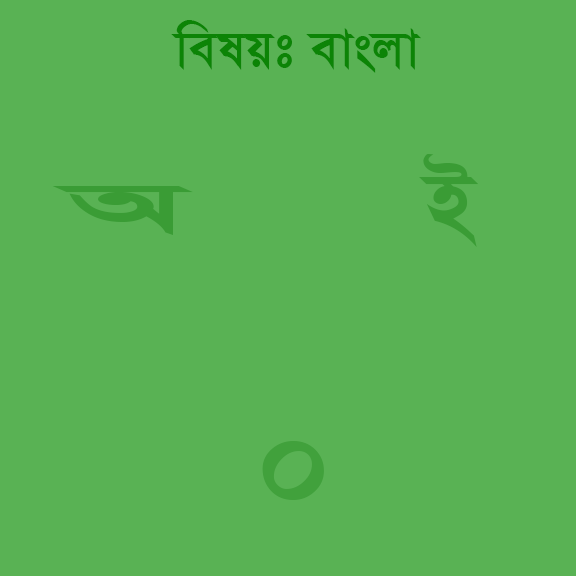
<style>
.page{position:relative;width:576px;height:576px;background:#59b254}
.page>*{position:absolute;margin:0}
.t1{font:60px "SutonnyMJBold";color:#0c8406}
.t2{font:103.7px "SutonnyMJBold";color:#3a9c35}
.t3{font:82.7px "SutonnyMJBold";color:#3a9c35;scale:2.38 1}
.t4{font:147.2px "SutonnyMJBold";color:#41a13c}
</style>
<div class="page">
<p class="t1" style="left:171px;top:20px;width:250px;height:53px">welqt evsjv</p>
<p class="t2" style="left:419px;top:154px;width:60px;height:93px">B</p>
<p class="t3" style="left:52px;top:186px;width:141px;height:49px">A</p>
<p class="t4" style="left:262px;top:441px;width:62px;height:59px">0</p>
</div>
